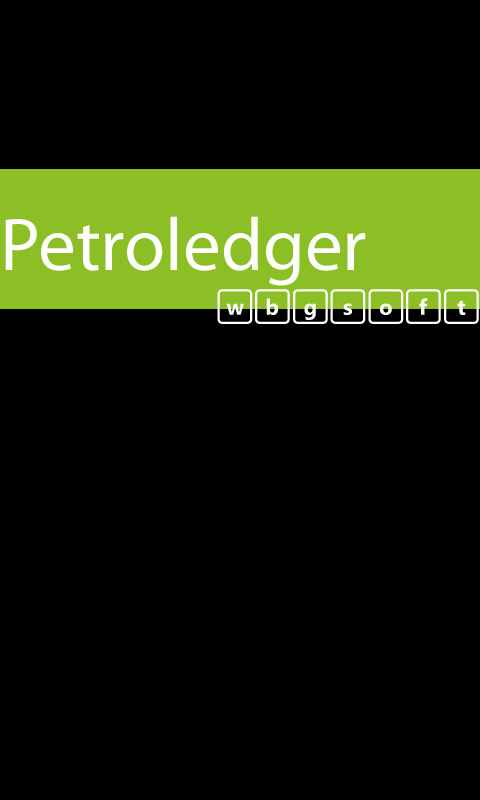
<style>
.page{position:relative;width:480px;height:800px;background:#000000}
.page>*{position:absolute;margin:0}
.t1{font:75px "MyriadPro-Regular";color:#ffffff}
</style>
<div class="page">
<p class="t1" style="left:5px;top:216px;width:361px;height:70px">Petroledger</p>
</div>
